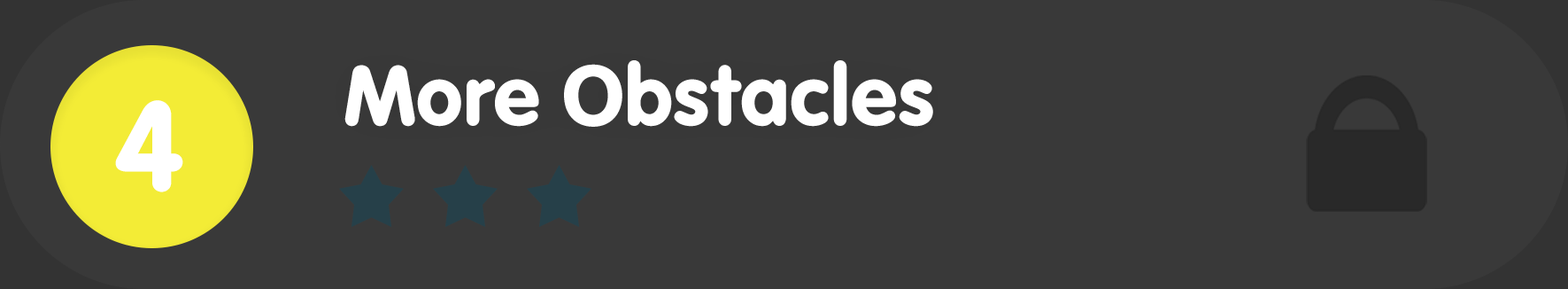
<style>
.page{position:relative;width:1568px;height:289px;background:#393939}
.page>*{position:absolute;margin:0}
.t1{font:88.5px "VAGRundschriftD";color:#ffffff}
.t2{font:132.8px "VAGRundschriftD";color:#ffffff}
</style>
<div class="page">
<p class="t1" style="left:344px;top:60px;width:589px;height:67px">More Obstacles</p>
<p class="t2" style="left:115px;top:100px;width:68px;height:92px">4</p>
</div>
